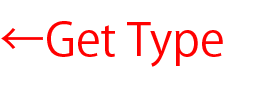
<style>
.page{position:relative;width:279px;height:85px;background:#ffffff}
.page>*{position:absolute;margin:0}
.t1{font:45px "KozGoPr6N-Regular";color:#ff0000}
.t2{font:2px "KozGoPr6N-Regular";color:#ff0000}
</style>
<div class="page">
<p class="t1" style="left:1px;top:21px;width:222px;height:46px"><span class="t2"><br></span>←Get Type</p>
</div>
